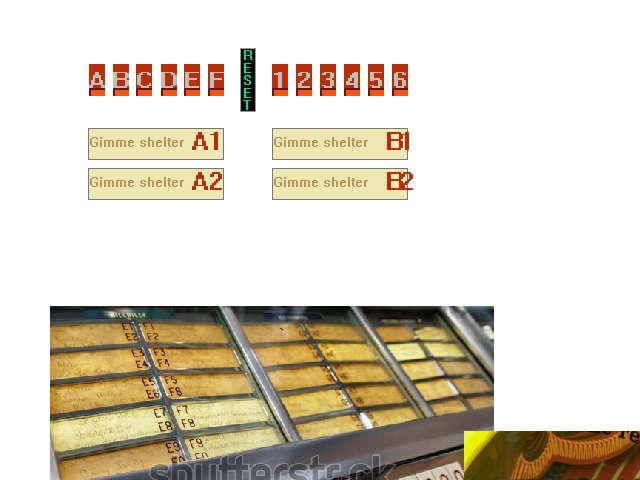
<style>
.page{position:relative;width:640px;height:480px;background:#ffffff}
.page>*{position:absolute;margin:0}
.t1{font:10.4px "System";color:#0cdb89}
.t2{font:19.8px "System";color:#bfbfb3;scale:1.21 1}
.t3{font:11px "System";color:#b99559}
.t4{font:22px "System";color:#b82e0a;scale:1.1 1}
</style>
<div class="page">
<p class="t1" style="left:243px;top:50px;width:10px;height:60px">R<br>E<br>S<br>E<br>T</p>
<p class="t2" style="left:89px;top:72px;width:16px;height:16px">A</p>
<p class="t2" style="left:113px;top:72px;width:16px;height:16px">B</p>
<p class="t2" style="left:137px;top:72px;width:14px;height:16px">C</p>
<p class="t2" style="left:161px;top:72px;width:16px;height:16px">D</p>
<p class="t2" style="left:185px;top:72px;width:14px;height:16px">E</p>
<p class="t2" style="left:210px;top:72px;width:14px;height:16px">F</p>
<p class="t2" style="left:274px;top:72px;width:8px;height:16px">1</p>
<p class="t2" style="left:298px;top:72px;width:12px;height:16px">2</p>
<p class="t2" style="left:322px;top:72px;width:12px;height:16px">3</p>
<p class="t2" style="left:346px;top:72px;width:12px;height:16px">4</p>
<p class="t2" style="left:370px;top:72px;width:12px;height:16px">5</p>
<p class="t2" style="left:394px;top:72px;width:12px;height:16px">6</p>
<p class="t3" style="left:90px;top:137px;width:94px;height:10px">Gimme shelter</p>
<p class="t4" style="left:192px;top:132px;width:26px;height:18px">A 1</p>
<p class="t3" style="left:274px;top:137px;width:94px;height:10px">Gimme shelter</p>
<p class="t4" style="left:387px;top:132px;width:22px;height:18px">B1</p>
<p class="t4" style="left:192px;top:172px;width:30px;height:18px">A 2</p>
<p class="t4" style="left:387px;top:172px;width:26px;height:18px">B2</p>
<p class="t3" style="left:90px;top:177px;width:94px;height:10px">Gimme shelter</p>
<p class="t3" style="left:274px;top:177px;width:94px;height:10px">Gimme shelter</p>
</div>
